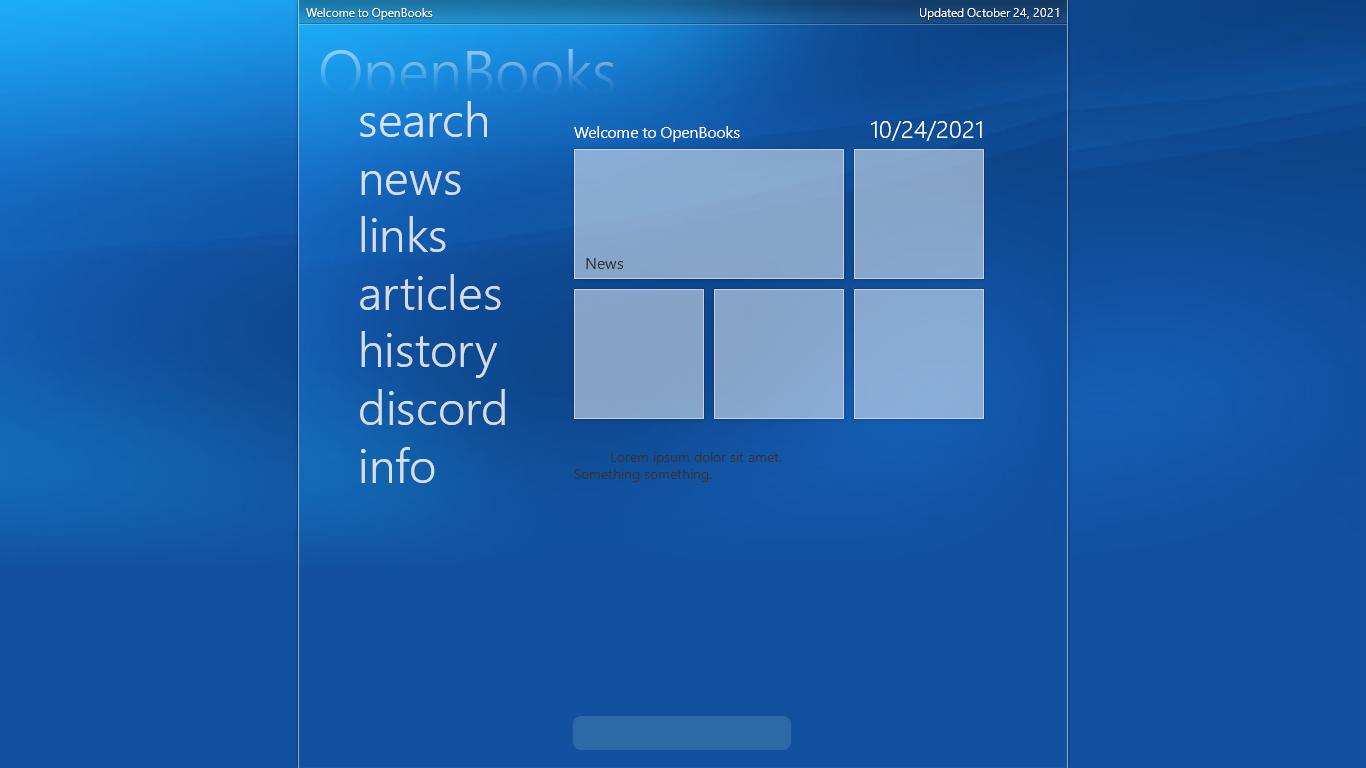
<style>
.page{position:relative;width:1366px;height:768px;background:#1251a0}
.page>*{position:absolute;margin:0}
.t1{font:12px "SegoeUI";color:#ffffff}
.t2{font:60px "SegoeUI-Semilight"}
.t3{font:48px "SegoeUI-Semilight";color:#d5ddeb}
.t4{font:16px "SegoeUI";color:#ffffff}
.t5{font:24px "SegoeUI-Semilight";color:#ffffff}
.t6{font:16px "SegoeUI";color:#343434}
.t7{font:14px "SegoeUI";color:#343434}
</style>
<div class="page">
<p class="t1" style="left:306px;top:8px;width:127px;height:12px">Welcome to OpenBooks</p>
<p class="t1" style="left:920px;top:8px;width:139px;height:12px">Updated October 24, 2021</p>
<p class="t2" style="left:321px;top:49px;width:293px;height:58px">OpenBooks</p>
<p class="t3" style="left:360px;top:101px;width:145px;height:382px">search<br>news<br>links<br>articles<br>history<br>discord<br>info</p>
<p class="t4" style="left:574px;top:126px;width:166px;height:16px">Welcome to OpenBooks</p>
<p class="t5" style="left:871px;top:121px;width:111px;height:20px">10/24/2021</p>
<p class="t6" style="left:586px;top:258px;width:37px;height:11px">News</p>
<p class="t7" style="left:574px;top:452px;width:208px;height:30px">Lorem ipsum dolor sit amet.<br>Something something.</p>
</div>
